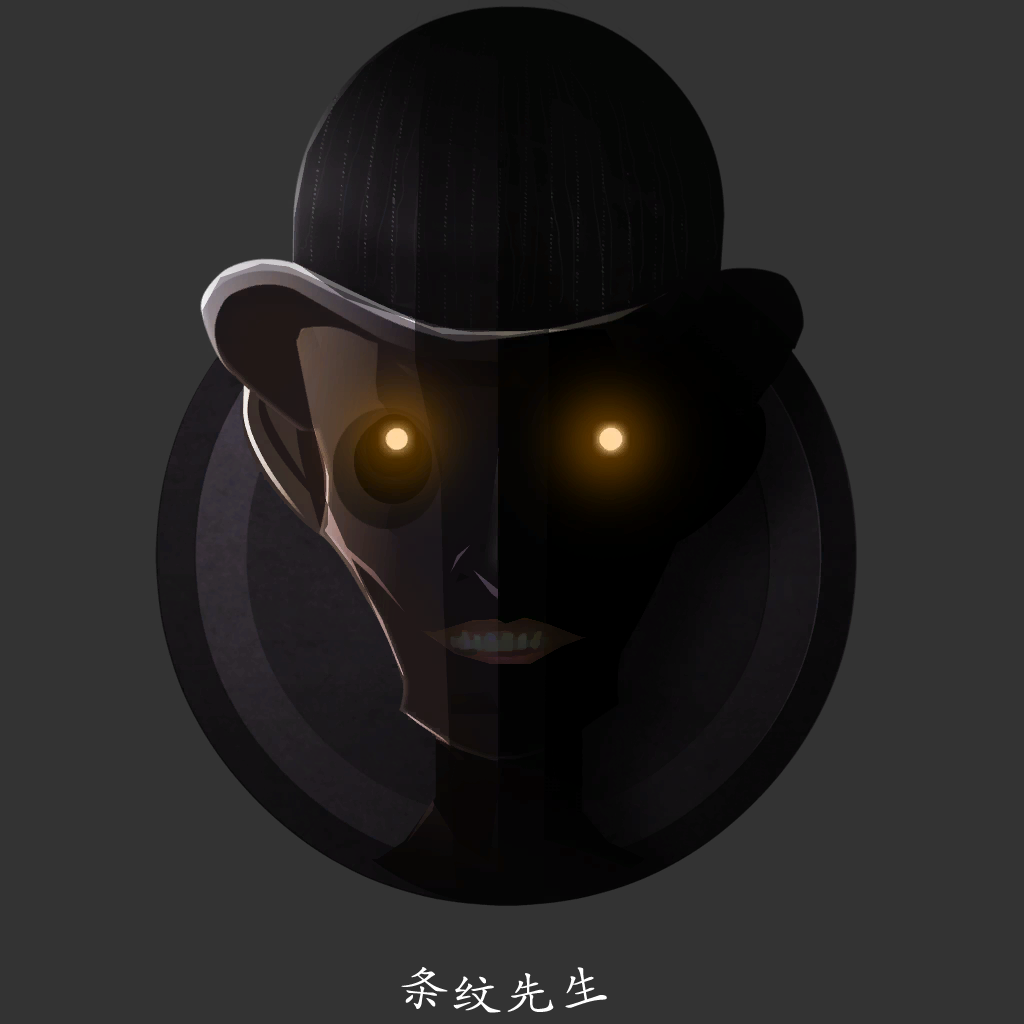
<style>
.page{position:relative;width:1024px;height:1024px;background:#333333}
.page>*{position:absolute;margin:0}
.t1{font:48px "STKaiti";letter-spacing:0.05em;color:#ffffff}
</style>
<div class="page">
<p class="t1" style="left:401px;top:967px;width:206px;height:46px">条纹先生</p>
</div>
